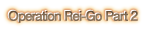
<style>
.page{position:relative;width:146px;height:31px;background:#ffffff}
.page>*{position:absolute;margin:0}
.t1{font:13px "FutoGoB101Pr5-Bold";letter-spacing:-0.08em;color:#88725a;font-weight:bold}
</style>
<div class="page">
<p class="t1" style="left:8px;top:10px;width:130px;height:13px">Operation Rei-Go Part 2</p>
</div>
